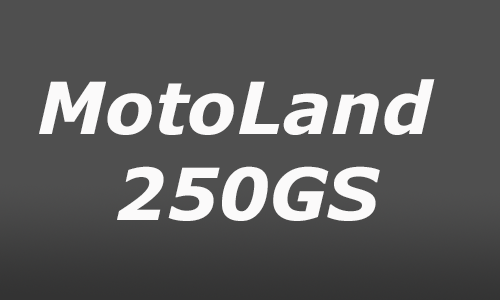
<style>
.page{position:relative;width:500px;height:300px;background:#4f4f4f}
.page>*{position:absolute;margin:0}
.t1{font:72px "Verdana-BoldItalic";color:#fbfafa}
</style>
<div class="page">
<p class="t1" style="left:39px;top:79px;width:396px;height:142px;text-align:center">MotoLand <br>250GS</p>
</div>
